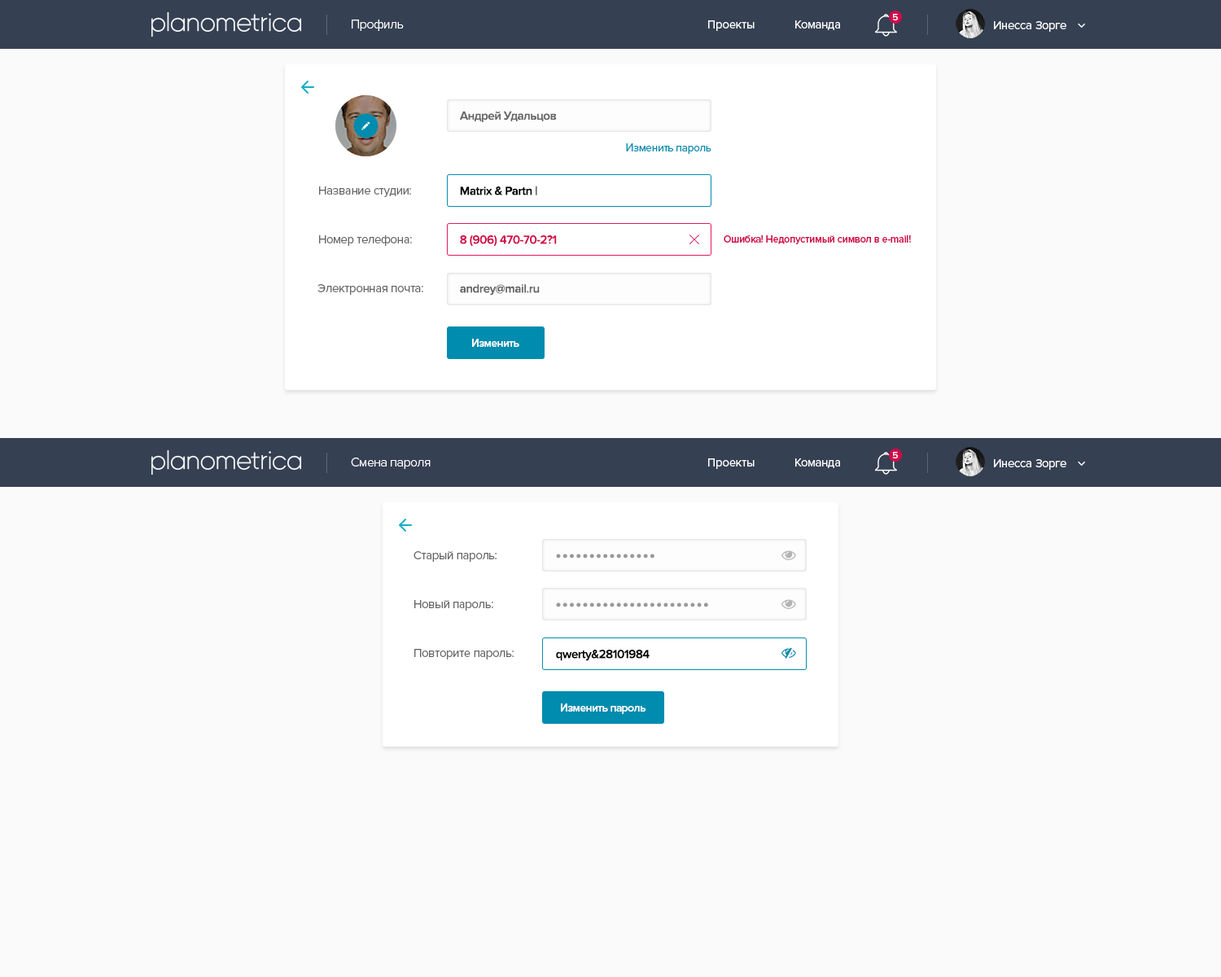
<style>
.page{position:relative;width:1221px;height:977px;background:#fafafa}
.page>*{position:absolute;margin:0}
.t1{font:9.8px "ProximaNova-Regular";letter-spacing:-0.05em;color:#ffffff;scale:0.96 1}
.t2{font:13px "ProximaNova-Light";letter-spacing:-0.025em;color:#ffffff}
.t3{font:12.2px "ProximaNova-Regular";letter-spacing:-0.01em;color:#ffffff}
.t4{font:12.2px "ProximaNova-Semibold";letter-spacing:-0.025em;color:#666666}
.t5{font:11.4px "ProximaNova-Regular";letter-spacing:-0.025em;color:#008caf}
.t6{font:12.2px/48.8px "ProximaNova-Semibold";letter-spacing:-0.025em;color:#d20a4c}
.t7{font:12.2px/48.8px "ProximaNova-Semibold";letter-spacing:-0.025em;color:#000000}
.t8{font:12.2px/48.8px "ProximaNova-Semibold";letter-spacing:-0.025em;color:#666666}
.t9{font:12.2px/48.8px "ProximaNova-Regular";letter-spacing:-0.025em;color:#666666}
.t10{font:10.6px "ProximaNova-Semibold";letter-spacing:-0.025em;color:#d20a4c}
.t11{font:10.6px "ProximaNova-Semibold";letter-spacing:-0.025em;color:#000000}
.t12{font:11.4px "ProximaNova-Semibold";letter-spacing:-0.025em;color:#ffffff;scale:0.96 1}
.t13{font:14.7px/48.8px "ProximaNova-Black";letter-spacing:0.1em;color:#999999}
.t14{font:12.2px/49.6px "ProximaNova-Semibold";letter-spacing:-0.025em;color:#000000}
</style>
<div class="page">
<p class="t1" style="left:892px;top:14px;width:6px;height:6px">5</p>
<p class="t2" style="left:352px;top:20px;width:52px;height:11px">Профиль</p>
<p class="t3" style="left:708px;top:20px;width:47px;height:11px">Проекты</p>
<p class="t3" style="left:795px;top:20px;width:45px;height:10px">Команда</p>
<p class="t3" style="left:994px;top:21px;width:72px;height:11px">Инесса Зорге</p>
<p class="t4" style="left:460px;top:111px;width:97px;height:11px">Андрей Удальцов</p>
<p class="t5" style="left:626px;top:143px;width:85px;height:11px">Изменить пароль</p>
<p class="t6" style="left:460px;top:186px;width:97px;height:109px"><span class="t7">Matrix &amp; Partn |<br></span>8 (906) 470-70-2?1<br><span class="t8">andrey@mail.ru</span></p>
<p class="t9" style="left:317px;top:186px;width:106px;height:109px">Название студии:<br>Номер телефона:<br>Электронная почта:</p>
<p class="t10" style="left:724px;top:235px;width:187px;height:9px"><span class="t11"><br></span>Ошибка! Недопустимый символ в e-mail!</p>
<p class="t12" style="left:472px;top:339px;width:47px;height:8px">Изменить</p>
<p class="t2" style="left:351px;top:457px;width:80px;height:12px">Смена пароля</p>
<p class="t3" style="left:708px;top:458px;width:47px;height:11px">Проекты</p>
<p class="t3" style="left:795px;top:458px;width:45px;height:10px">Команда</p>
<p class="t1" style="left:892px;top:452px;width:6px;height:6px">5</p>
<p class="t3" style="left:994px;top:459px;width:72px;height:11px">Инесса Зорге</p>
<p class="t9" style="left:413px;top:551px;width:101px;height:108px">Старый пароль:<br>Новый пароль:<br>Повторите пароль:</p>
<p class="t13" style="left:556px;top:553px;width:152px;height:108px">•••••••••••••••<br>•••••••••••••••••••••••<br><span class="t14">qwerty&amp;28101984</span></p>
<p class="t12" style="left:561px;top:703px;width:84px;height:11px">Изменить пароль</p>
</div>
